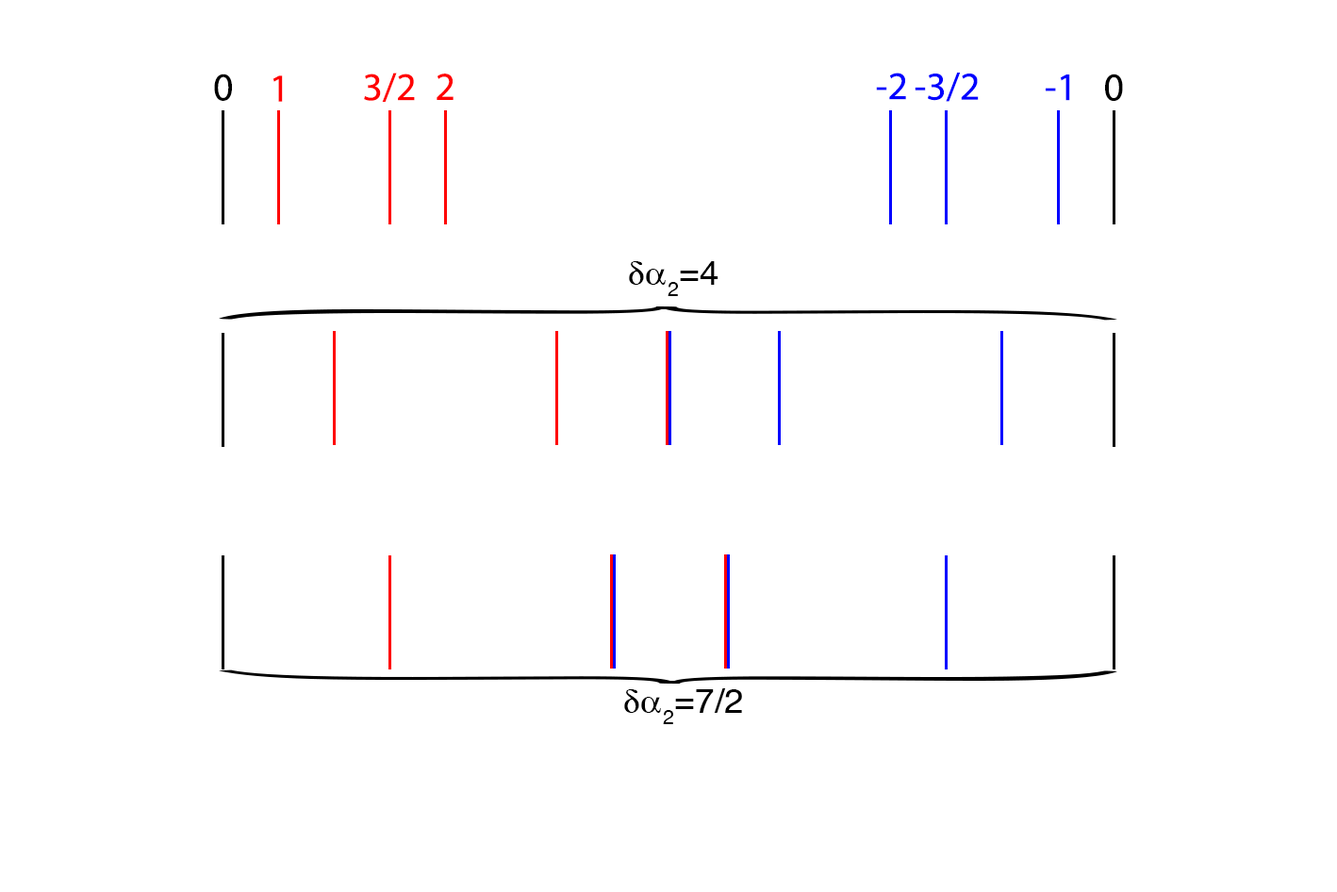
<style>
.page{position:relative;width:1337px;height:892px;background:#ffffff}
.page>*{position:absolute;margin:0}
.t1{font:39.3px "MyriadPro-Regular";color:#000000}
.t2{font:39.3px "MyriadPro-Regular";color:#ff0000}
.t3{font:39.3px "MyriadPro-Regular";color:#0000ff}
.t4{font:35.4px "Vektor";color:#000000}
</style>
<div class="page">
<p class="t1" style="left:214px;top:74px;width:18px;height:27px">0</p>
<p class="t2" style="left:273px;top:75px;width:10px;height:27px">1</p>
<p class="t2" style="left:364px;top:73px;width:51px;height:29px">3/2</p>
<p class="t2" style="left:437px;top:74px;width:17px;height:26px">2</p>
<p class="t3" style="left:876px;top:73px;width:30px;height:27px">-2</p>
<p class="t3" style="left:915px;top:73px;width:64px;height:29px">-3/2</p>
<p class="t3" style="left:1046px;top:74px;width:24px;height:27px">-1</p>
<p class="t1" style="left:1105px;top:74px;width:18px;height:27px">0</p>
<p class="t4" style="left:629px;top:261px;width:89px;height:35px">da2=4</p>
<p class="t4" style="left:624px;top:688px;width:118px;height:36px">da2=7/2</p>
</div>
